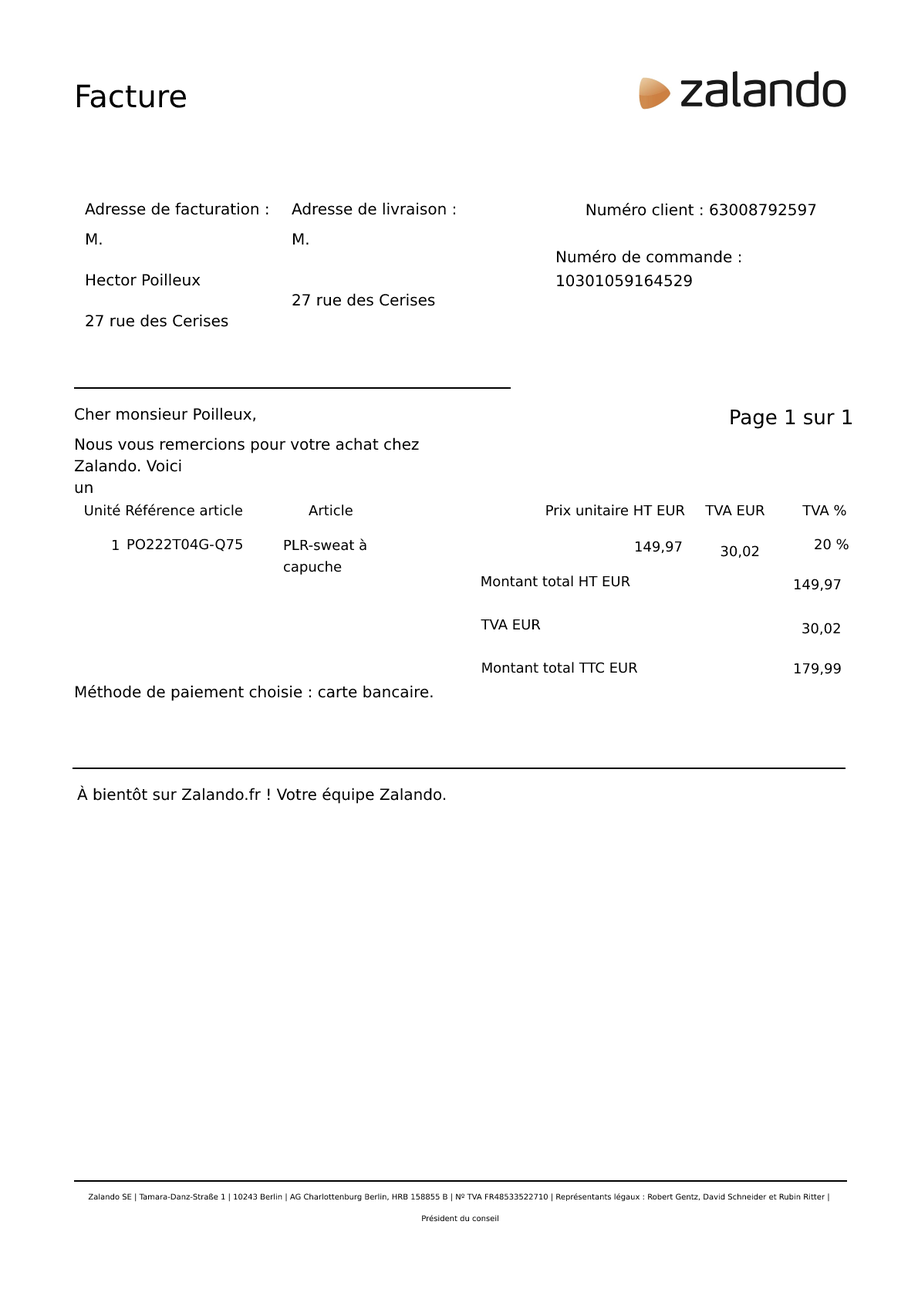
<style>
.page{position:relative;width:918px;height:1299px;background:#ffffff}
.page>*{position:absolute;margin:0}
.t1{font:30.9px "Helvetica";color:#000000}
.t2{font:15.4px "Helvetica";color:#000000}
.t3{font:15.4px/23.5px "Helvetica";color:#000000}
.t4{font:15.4px/20.5px "Helvetica";color:#000000}
.t5{font:15.4px/24.3px "Helvetica";color:#000000}
.t6{font:15.4px/21.7px "Helvetica";color:#000000}
.t7{font:20.1px "Helvetica";color:#000000}
.t8{font:15.4px/21.6px "Helvetica";color:#000000}
.t9{font:13.9px "Helvetica";color:#000000}
.t10{font:13.9px/0.8px "Helvetica";color:#000000}
.t11{font:13.9px/21.6px "Helvetica";color:#000000}
.t12{font:13.9px/2.3px "Helvetica";color:#000000}
.t13{font:7.7px/21.6px "Helvetica";color:#000000}
</style>
<div class="page">
<p class="t1" style="left:76px;top:84px;width:110px;height:24px">Facture</p>
<p class="t2" style="left:85px;top:202px;width:183px;height:13px">Adresse de facturation :</p>
<p class="t2" style="left:292px;top:202px;width:164px;height:13px">Adresse de livraison :</p>
<p class="t3" style="left:556px;top:203px;width:260px;height:84px;text-align:right"><span class="t4">Numéro client : 63008792597<br></span><br>Numéro de commande : 10301059164529<br><br>Numéro de document : 203033950445<br><span class="t5"><br>Facture du 29 Septembre 2022<br></span><span class="t6"><br>Expédition du 29 Septembre 2022</span></p>
<p class="t4" style="left:86px;top:233px;width:142px;height:94px">M.<br><br>Hector Poilleux<br><br>27 rue des Cerises<br><br>77170-Brie-Comte-Robert<br><br>France</p>
<p class="t4" style="left:292px;top:233px;width:17px;height:12px"><span class="t2">M. <br></span><br>Hector Poilleux</p>
<p class="t4" style="left:292px;top:293px;width:143px;height:13px">27 rue des Cerises<br><br>77170-Brie-Comte-Robert<br><br>France</p>
<p class="t2" style="left:75px;top:407px;width:180px;height:15px">Cher monsieur Poilleux,</p>
<p class="t7" style="left:731px;top:410px;width:121px;height:19px">Page 1 sur 1</p>
<p class="t6" style="left:74px;top:437px;width:345px;height:57px">Nous vous remercions pour votre achat chez Zalando. Voici <span class="t8"><br>un <br></span><span class="t8"><br>récapitulatif de votre commande :</span></p>
<p class="t9" style="left:85px;top:504px;width:157px;height:12px">Unité Référence article</p>
<p class="t9" style="left:309px;top:504px;width:44px;height:12px">Article</p>
<p class="t9" style="left:546px;top:504px;width:139px;height:12px">Prix unitaire HT EUR</p>
<p class="t9" style="left:705px;top:504px;width:60px;height:12px">TVA EUR</p>
<p class="t9" style="left:802px;top:504px;width:44px;height:12px">TVA %</p>
<p class="t10" style="left:112px;top:539px;width:647px;height:19px"><span class="t11">1<br></span><br>149,97<br><span class="t12"><br>30,02</span></p>
<p class="t9" style="left:127px;top:538px;width:115px;height:14px">PO222T04G-Q75</p>
<p class="t11" style="left:283px;top:538px;width:83px;height:37px">PLR-sweat à capuche<br><br>Jersey double</p>
<p class="t9" style="left:815px;top:538px;width:34px;height:12px">20 %</p>
<p class="t11" style="left:481px;top:575px;width:157px;height:98px"><span class="t12"> Montant total HT EUR <br><br>     </span>TVA EUR<br><br>     Montant total TTC EUR</p>
<p class="t9" style="left:794px;top:579px;width:47px;height:13px">149,97</p>
<p class="t11" style="left:802px;top:623px;width:38px;height:13px;text-align:right">30,02 <br><br>179,99</p>
<p class="t9" style="left:794px;top:663px;width:47px;height:13px">179,99</p>
<p class="t2" style="left:75px;top:685px;width:358px;height:16px">Méthode de paiement choisie : carte bancaire.</p>
<p class="t2" style="left:77px;top:785px;width:369px;height:19px">À bientôt sur Zalando.fr ! Votre équipe Zalando.</p>
<p class="t13" style="left:88px;top:1193px;width:741px;height:29px;text-align:center">Zalando SE | Tamara-Danz-Straße 1 | 10243 Berlin | AG Charlottenburg Berlin, HRB 158855 B | Nº TVA FR48533522710 | Représentants légaux : Robert Gentz, David Schneider et Rubin Ritter |<br> Président du conseil</p>
</div>
